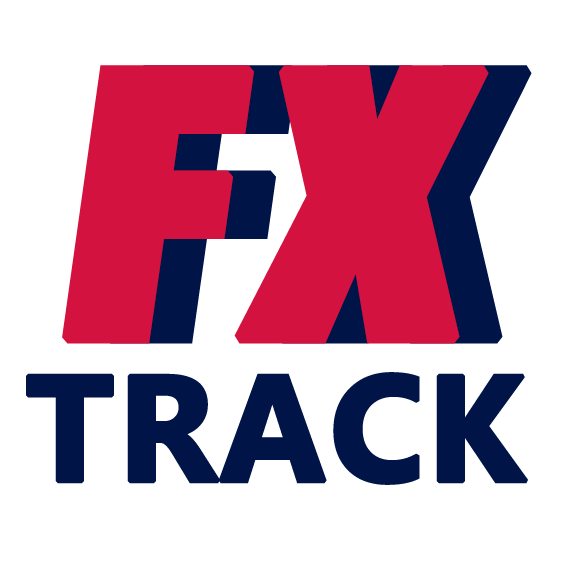
<style>
.page{position:relative;width:563px;height:563px;background:#ffffff}
.page>*{position:absolute;margin:0}
.t1{font:400px "GillSansNova-CondXBdItalic";color:#d3123f;font-weight:bold}
.t2{font:400px "GillSansNova-CondXBdItalic";font-weight:bold}
.t3{font:150px "Gadugi-Bold";color:#001447;font-weight:bold}
</style>
<div class="page">
<p class="t1" style="left:62px;top:65px;width:427px;height:279px">FX</p>
<p class="t2" style="left:105px;top:65px;width:427px;height:279px">FX</p>
<p class="t3" style="left:26px;top:372px;width:502px;height:113px">TRACK</p>
</div>
